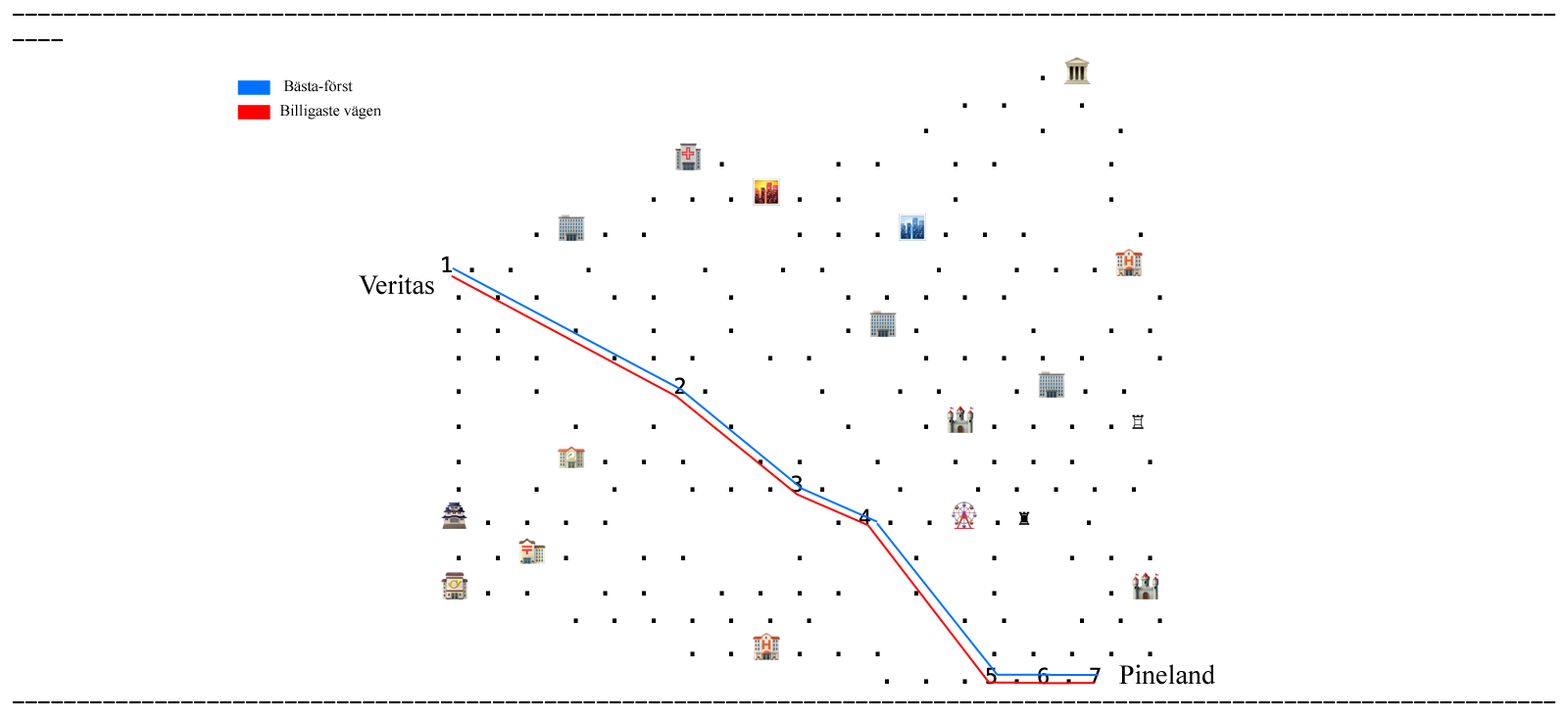
<style>
.page{position:relative;width:1568px;height:719px;background:#ffffff}
.page>*{position:absolute;margin:0}
.t1{font:15.7px "TimesNewRomanPSMT";color:#000000}
.t2{font:27.4px "TimesNewRomanPSMT";color:#000000}
</style>
<div class="page">
<p class="t1" style="left:283px;top:79px;width:70px;height:13px">Bästa-först</p>
<p class="t1" style="left:279px;top:104px;width:102px;height:16px">Billigaste vägen</p>
<p class="t2" style="left:359px;top:274px;width:75px;height:21px">Veritas</p>
<p class="t2" style="left:1119px;top:664px;width:96px;height:21px">Pineland</p>
</div>
